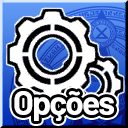
<style>
.page{position:relative;width:128px;height:128px;background:#ffffff}
.page>*{position:absolute;margin:0}
.t1{font:33.3px "Barlow-Bold";letter-spacing:-0.05em;color:#ffffff}
</style>
<div class="page">
<p class="t1" style="left:14px;top:91px;width:100px;height:30px">Opções</p>
</div>
